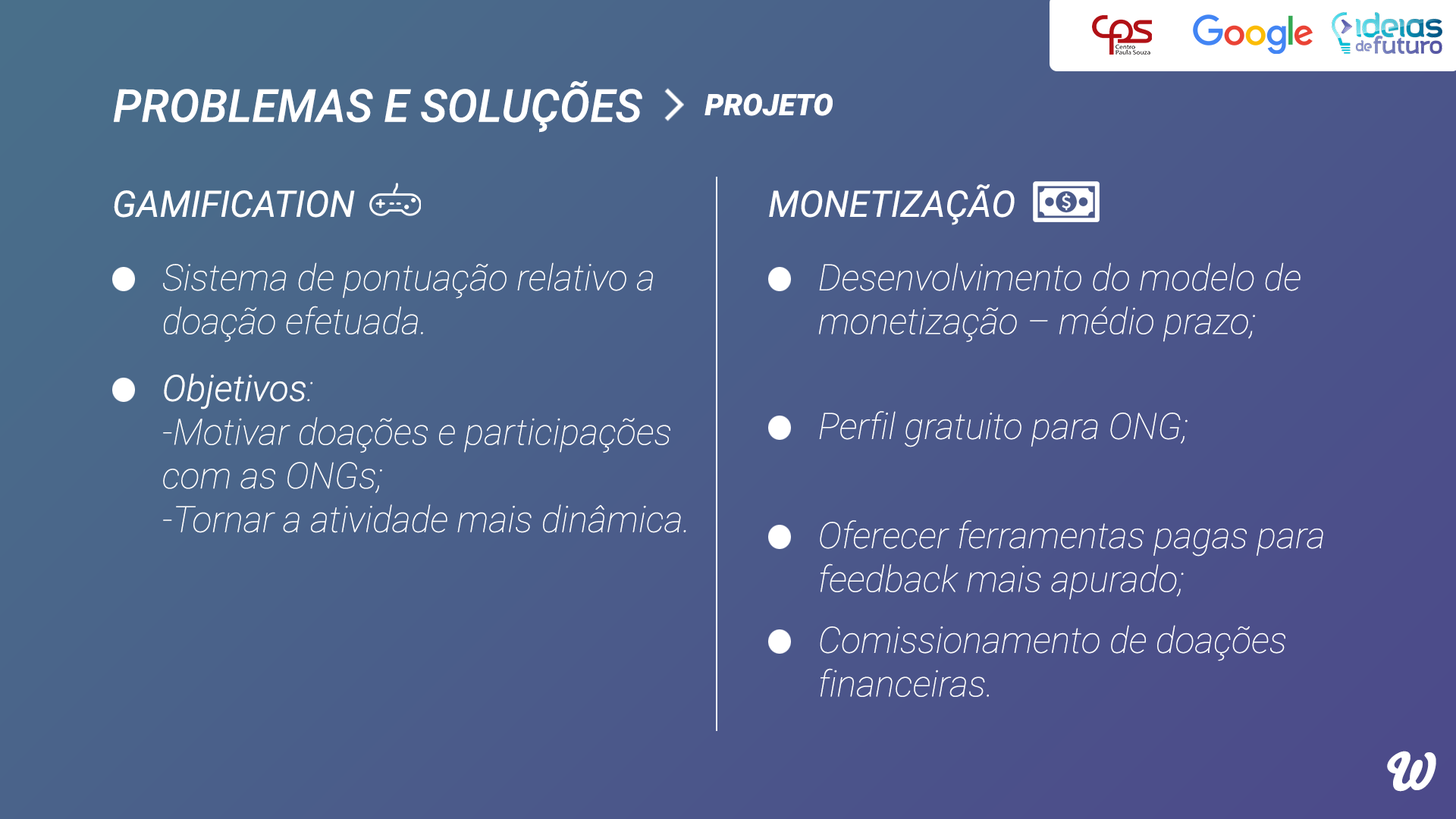
<style>
.page{position:relative;width:1456px;height:819px}
.page>*{position:absolute;margin:0}
.t1{font:45.5px "Roboto-MediumItalic";color:#ffffff}
.t2{font:29.7px "Roboto-BlackItalic";color:#ffffff}
.t3{font:36.4px "Roboto-Italic";color:#ffffff}
.t4{font:36.4px "Roboto-ThinItalic";color:#ffffff}
.t5{font:36.4px "Roboto-LightItalic";color:#ffffff}
.t6{font:50.8px "Bello-Pro";color:#ffffff}
</style>
<div class="page">
<p class="t1" style="left:113px;top:80px;width:529px;height:53px">PROBLEMAS E SOLUÇÕES</p>
<p class="t2" style="left:704px;top:93px;width:129px;height:23px">PROJETO</p>
<p class="t3" style="left:769px;top:184px;width:246px;height:41px">MONETIZAÇÃO</p>
<p class="t3" style="left:114px;top:190px;width:241px;height:28px">GAMIFICATION</p>
<p class="t4" style="left:163px;top:262px;width:490px;height:80px">Sistema de pontuação relativo a doação efetuada.</p>
<p class="t4" style="left:818px;top:262px;width:483px;height:80px">Desenvolvimento do modelo de monetização – médio prazo;</p>
<p class="t4" style="left:163px;top:373px;width:523px;height:160px"><span class="t5">Objetivos</span>: <br>-Motivar doações e participações com as ONGs;<br>-Tornar a atividade mais dinâmica.</p>
<p class="t4" style="left:819px;top:411px;width:369px;height:36px">Perfil gratuito para ONG;</p>
<p class="t4" style="left:820px;top:520px;width:503px;height:80px">Oferecer ferramentas pagas para feedback mais apurado;</p>
<p class="t4" style="left:820px;top:625px;width:465px;height:72px">Comissionamento de doações financeiras.</p>
<p class="t6" style="left:1387px;top:751px;width:49px;height:41px">W</p>
</div>
